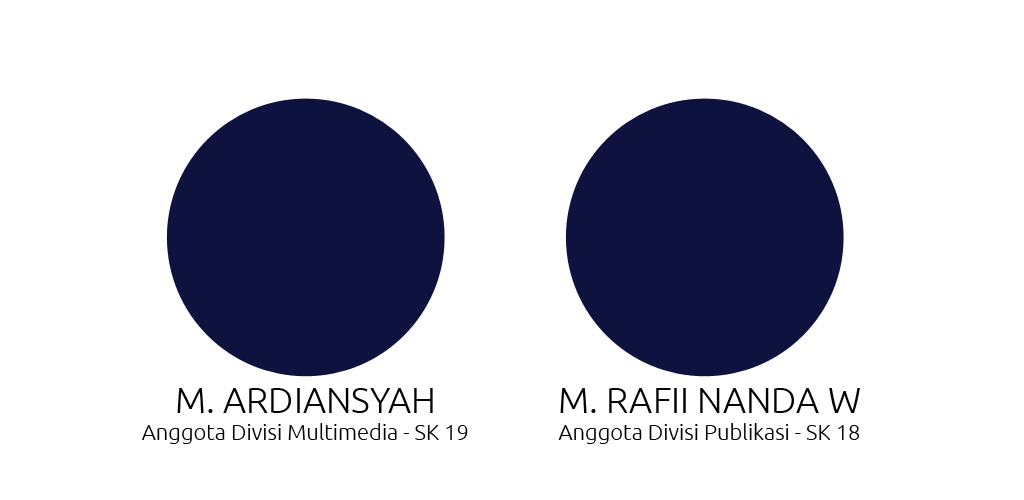
<style>
.page{position:relative;width:1024px;height:500px;background:#ffffff}
.page>*{position:absolute;margin:0}
.t1{font:22px "Ubuntu-Light";color:#000000}
.t2{font:36px "Ubuntu-Light";color:#000000}
</style>
<div class="page">
<p class="t1" style="left:142px;top:388px;width:326px;height:56px;text-align:center"><span class="t2">M. ARDIANSYAH<br></span>Anggota Divisi Multimedia - SK 19</p>
<p class="t1" style="left:558px;top:388px;width:302px;height:56px;text-align:center"><span class="t2">M. RAFII NANDA W<br></span>Anggota Divisi Publikasi - SK 18</p>
</div>
